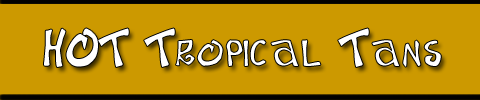
<style>
.page{position:relative;width:480px;height:100px;background:#cc9900}
.page>*{position:absolute;margin:0}
.t1{font:48px "BeachTypeMedium";color:#ffffff}
</style>
<div class="page">
<p class="t1" style="left:44px;top:28px;width:397px;height:39px">HOT Tropical Tans</p>
</div>
